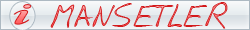
<style>
.page{position:relative;width:250px;height:30px}
.page>*{position:absolute;margin:0}
.t1{font:31px "AlexsHand-Plain"}
</style>
<div class="page">
<p class="t1" style="left:50px;top:2px;width:178px;height:27px">MANSETLER</p>
</div>
